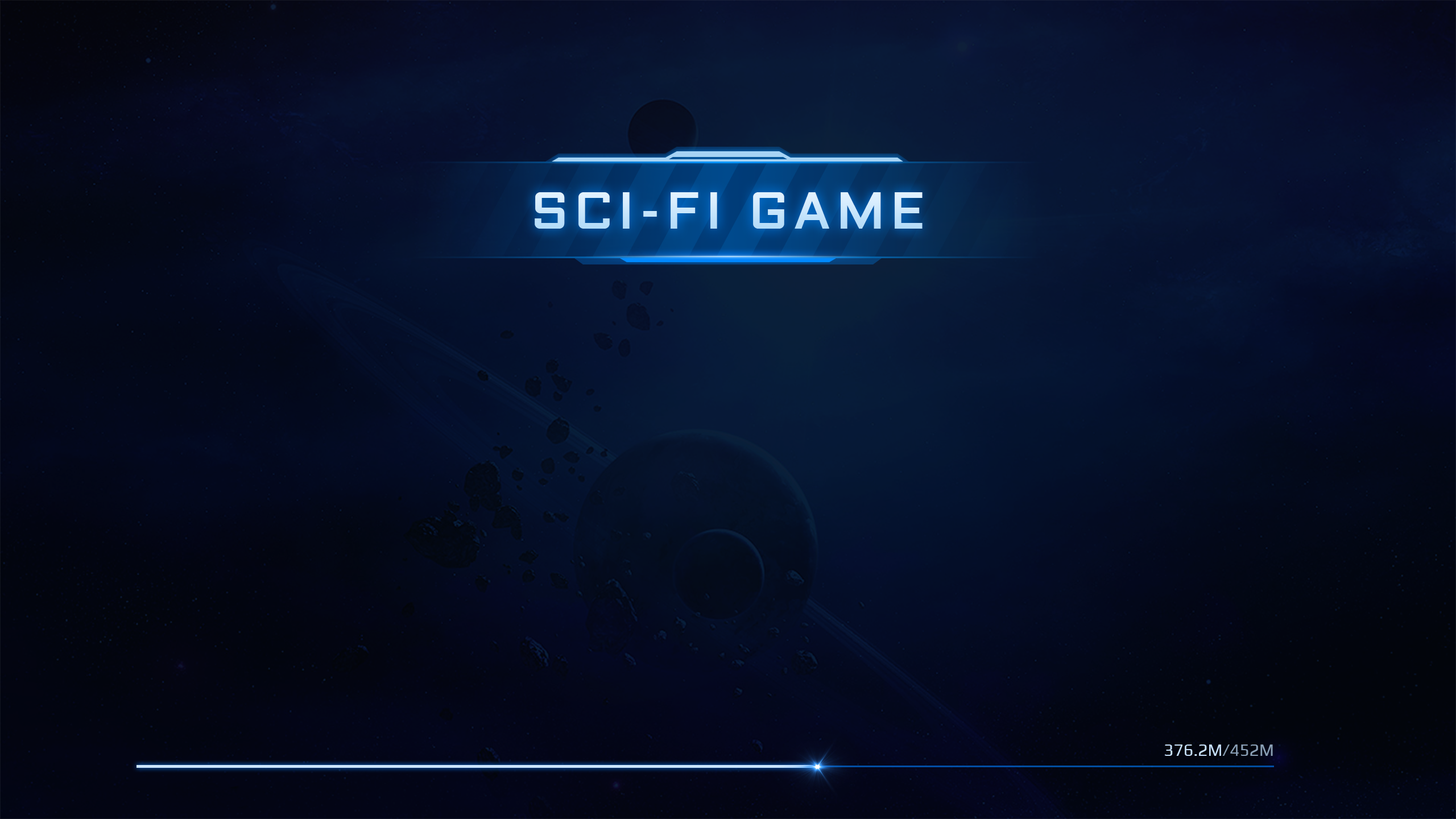
<style>
.page{position:relative;width:1456px;height:819px}
.page>*{position:absolute;margin:0}
.t1{font:51.2px "Aldrich";letter-spacing:0.1em;color:#cbe7fc;font-weight:bold}
.t2{font:17.1px "Play-Regular";color:#c6dff9}
.t3{font:17.1px "Play-Regular";color:#8a9fb5}
</style>
<div class="page">
<p class="t1" style="left:535px;top:192px;width:388px;height:37px">SCI-FI GAME</p>
<p class="t2" style="left:1165px;top:744px;width:108px;height:12px">376.2M<span class="t3">/452M</span></p>
</div>
